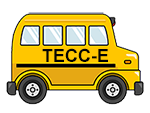
<style>
.page{position:relative;width:150px;height:113px;background:#ffffff}
.page>*{position:absolute;margin:0}
.t1{font:18.1px "Arial-BoldMT";color:#030303}
</style>
<div class="page">
<p class="t1" style="left:42px;top:48px;width:66px;height:14px">TECC-E</p>
</div>
